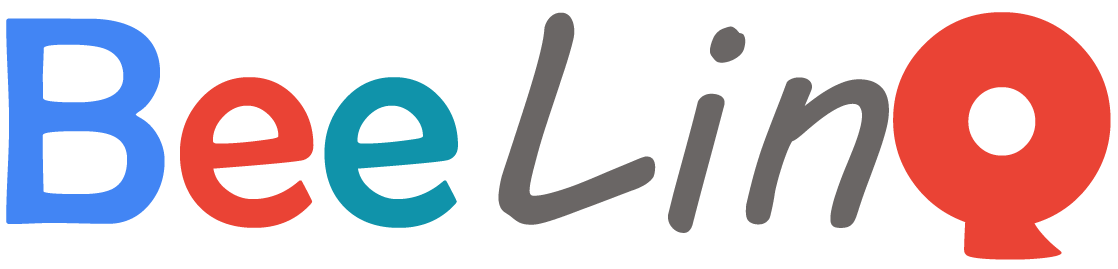
<style>
.page{position:relative;width:1118px;height:269px;background:#ffffff}
.page>*{position:absolute;margin:0}
.t1{font:300px "MVBoli";color:#6a6665}
.t2{font:300px "BerlinSansFB-Reg";color:#4285f4}
.t3{font:300px "BerlinSansFB-Reg";color:#ea4335}
.t4{font:300px "BerlinSansFB-Reg";color:#1093aa}
.t5{font:300px "BerlinSansFB-Bold";color:#ea4335}
</style>
<div class="page">
<p class="t1" style="left:6px;top:12px;width:1105px;height:248px"><span class="t2">B</span><span class="t3">e</span><span class="t4">e</span>Lin<span class="t5">Q</span></p>
</div>
